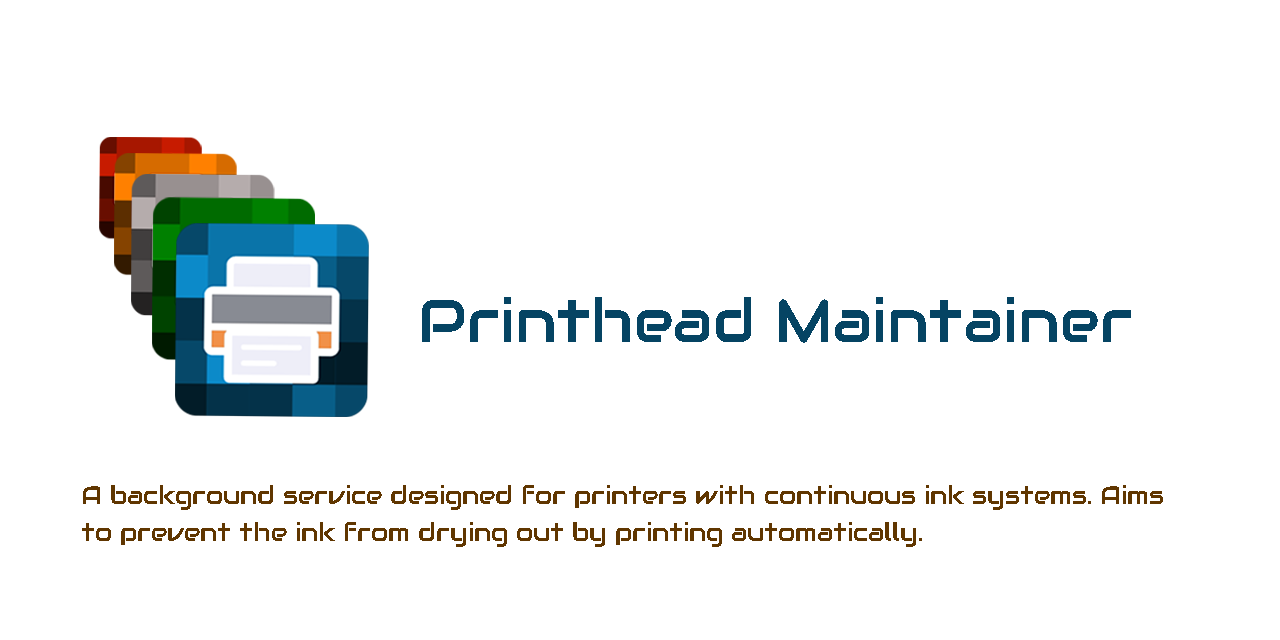
<style>
.page{position:relative;width:1280px;height:640px;background:#ffffff}
.page>*{position:absolute;margin:0}
.t1{font:60.4px "Audiowide-Regular";color:#054463}
.t2{font:25px/37.5px "Audiowide-Regular";color:#603600}
</style>
<div class="page">
<p class="t1" style="left:422px;top:297px;width:709px;height:46px">Printhead Maintainer</p>
<p class="t2" style="left:82px;top:485px;width:1081px;height:62px">A background service designed for printers with continuous ink systems. Aims to prevent the ink from drying out by printing automatically.</p>
</div>
